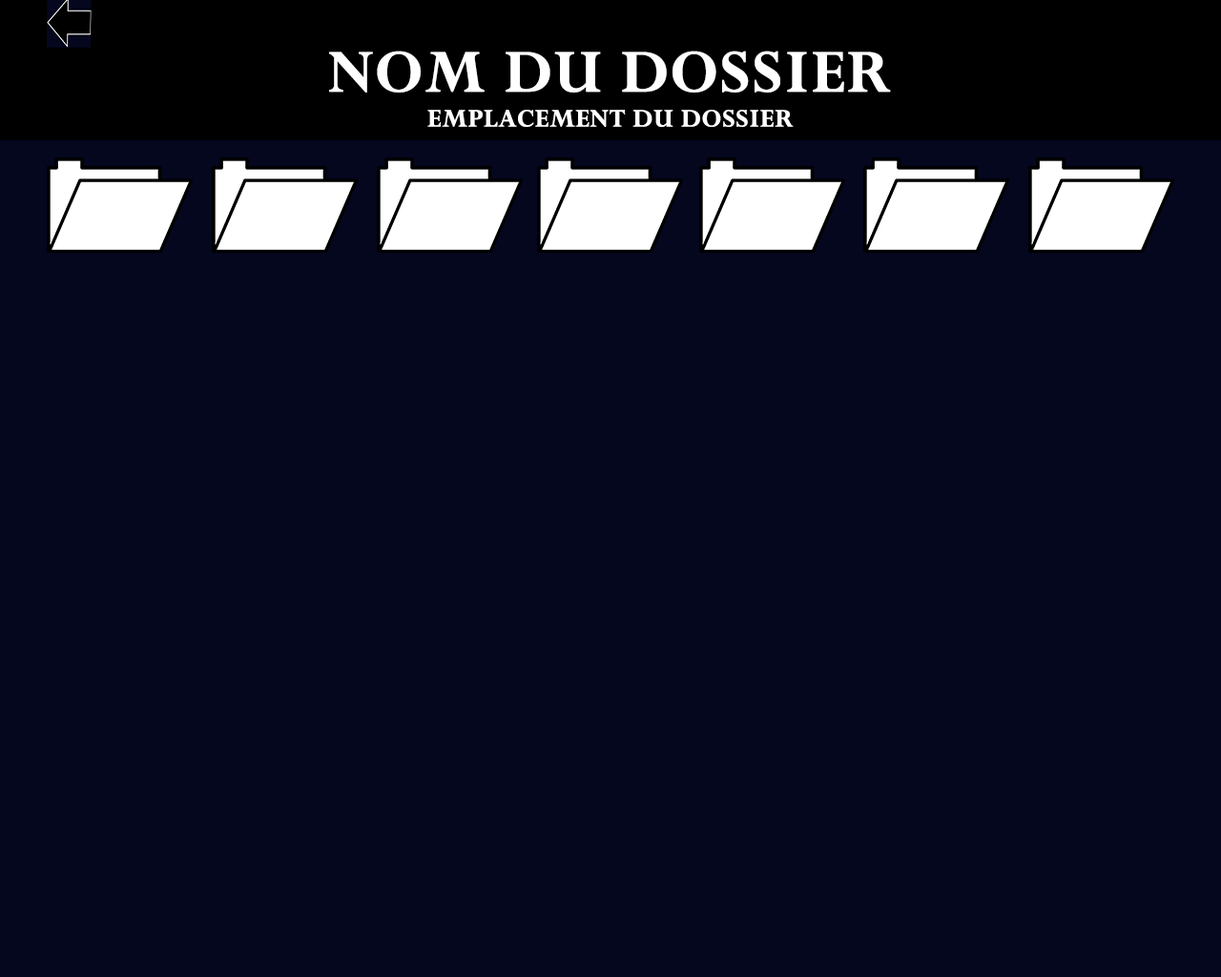
<style>
.page{position:relative;width:1221px;height:977px;background:#04071e}
.page>*{position:absolute;margin:0}
.t1{font:66.8px "Perpetua-Bold";color:#ffffff;text-transform:uppercase;font-weight:bold}
.t2{font:27.7px "Perpetua-Bold";color:#ffffff;text-transform:uppercase;font-weight:bold}
</style>
<div class="page">
<p class="t1" style="left:329px;top:51px;width:562px;height:42px">nom du dossier</p>
<p class="t2" style="left:427px;top:110px;width:367px;height:17px">emplacement du dossier</p>
</div>
